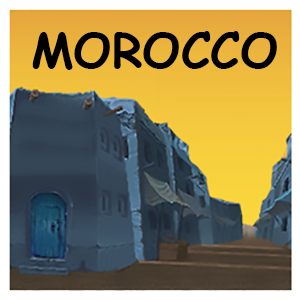
<style>
.page{position:relative;width:300px;height:300px}
.page>*{position:absolute;margin:0}
.t1{font:48px "ComicSansMS-Bold";color:#000000}
</style>
<div class="page">
<p class="t1" style="left:32px;top:31px;width:245px;height:39px">MOROCCO</p>
</div>
